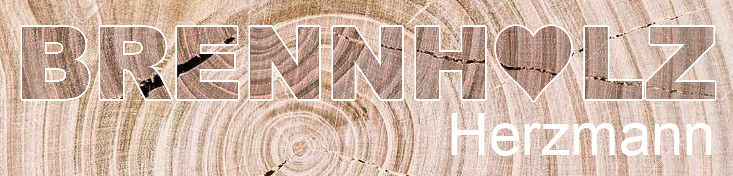
<style>
.page{position:relative;width:733px;height:176px}
.page>*{position:absolute;margin:0}
.t1{font:100px "Arial-Black"}
.t2{font:58.3px "ArialMT";color:#ffffff}
</style>
<div class="page">
<p class="t1" style="left:22px;top:27px;width:693px;height:72px">BRENNH   LZ</p>
<p class="t2" style="left:451px;top:113px;width:261px;height:43px">Herzmann</p>
</div>
